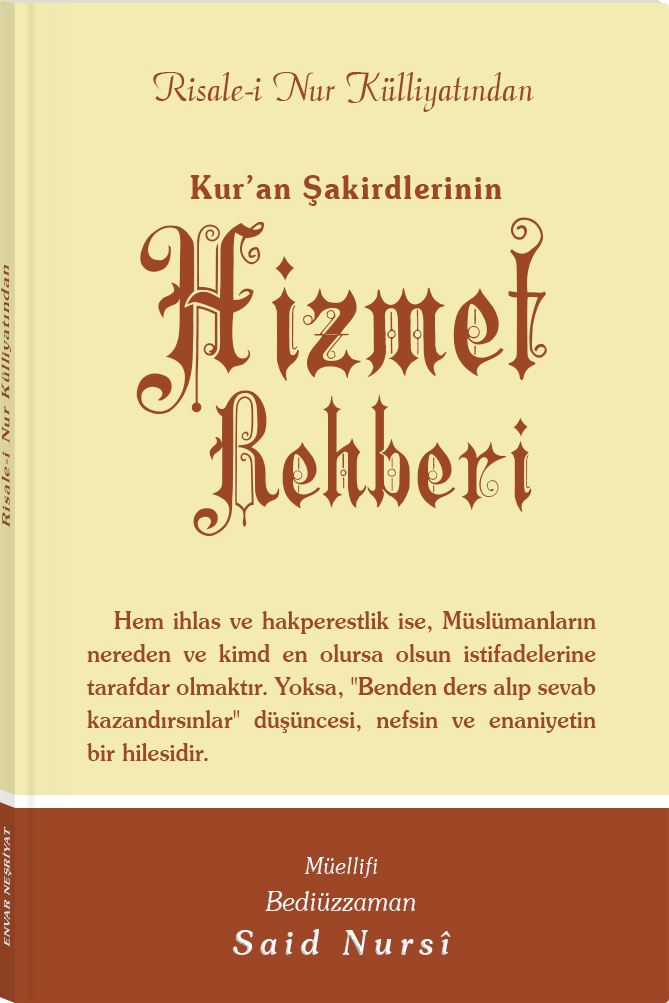
<style>
.page{position:relative;width:669px;height:1003px;background:#f3ebb2}
.page>*{position:absolute;margin:0}
.t1{font:45.3px "Barla © 072 Aria ScriptScriptSSi";color:#9d4726;scale:0.94 1}
.t2{font:31.8px "SouvenirITCbyBT-Demi";letter-spacing:0.04em;color:#9d4726;scale:0.92 1}
.t3{font:199.4px "Barla © 001 Liva Nur";letter-spacing:-0.001em;color:#9d4726}
.t4{font:11.4px "Souvenir-Medium";letter-spacing:0.08em;color:#9d4726;scale:1.65 1}
.t5{font:150.4px "Barla © 001 Liva Nur";letter-spacing:-0.001em;color:#9d4726}
.t6{font:24.3px/33px "Souvenir-Medium";color:#9d4726;scale:0.92 1}
.t7{font:8.3px "Souvenir-Medium";letter-spacing:0.08em;color:#e5e5e5;scale:1.43 1}
.t8{font:27.1px/37.8px "Souvenir-LightItalic";color:#ffffff;scale:0.92 1}
.t9{font:22.8px/39.8px "Souvenir-LightItalic";color:#ffffff;scale:0.92 1}
.t10{font:33.9px/43.8px "Souvenir-MediumItalic";letter-spacing:0.2em;color:#ffffff;scale:0.92 1}
</style>
<div class="page">
<p class="t1" style="left:153px;top:72px;width:381px;height:40px">Risale-i Nur Külliyatından</p>
<p class="t2" style="left:190px;top:175px;width:312px;height:31px">Kur’an Şakirdlerinin</p>
<p class="t3" style="left:136px;top:217px;width:411px;height:198px">Hizmet</p>
<p class="t4" style="left:1px;top:265px;width:10px;height:263px;rotate:-90deg">Risale-i Nur Külliyatından</p>
<p class="t5" style="left:193px;top:390px;width:339px;height:147px">Rehberi</p>
<p class="t6" style="left:87px;top:611px;width:509px;height:150px;text-align:justify">Hem ihlas ve hakperestlik ise, Müslümanların nereden ve kimd en olursa olsun istifadelerine tarafdar olmaktır. Yoksa, "Benden ders alıp sevab kazandırsınlar" düşüncesi, nefsin ve enaniyetin bir hilesidir.</p>
<p class="t7" style="left:2px;top:826px;width:10px;height:121px;rotate:-90deg">ENVAR NEŞRİYAT</p>
<p class="t8" style="left:233px;top:857px;width:218px;height:98px;text-align:center"><span class="t9">Müellifi<br></span>Bediüzzaman<br><span class="t10">Said Nursî</span></p>
</div>
